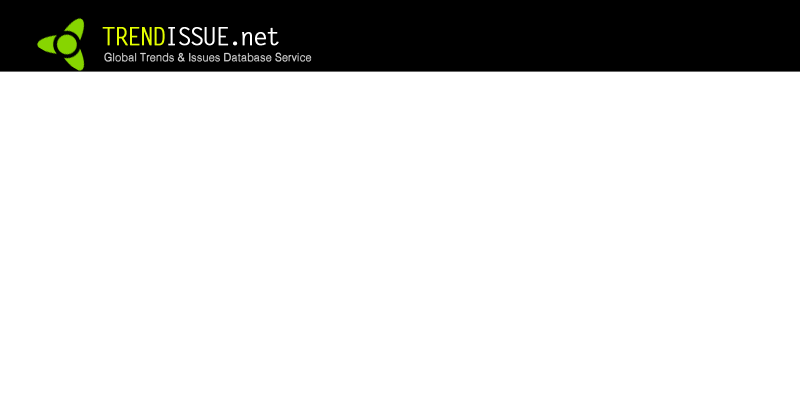
<style>
.page{position:relative;width:800px;height:400px;background:#ffffff}
.page>*{position:absolute;margin:0}
.t1{font:24px "LetterGothicStd";letter-spacing:-0.1em;color:#ffffff;font-weight:bold}
.t2{font:24px "LetterGothicStd";letter-spacing:-0.1em;color:#e4ff00;font-weight:bold}
.t3{font:11px "CATIA-Symbols";color:#d1d1d1;font-weight:bold}
</style>
<div class="page">
<p class="t1" style="left:102px;top:27px;width:177px;height:19px"><span class="t2">TREND</span>ISSUE.net</p>
<p class="t3" style="left:104px;top:52px;width:208px;height:10px">Global Trends &amp; Issues Database Service</p>
</div>
